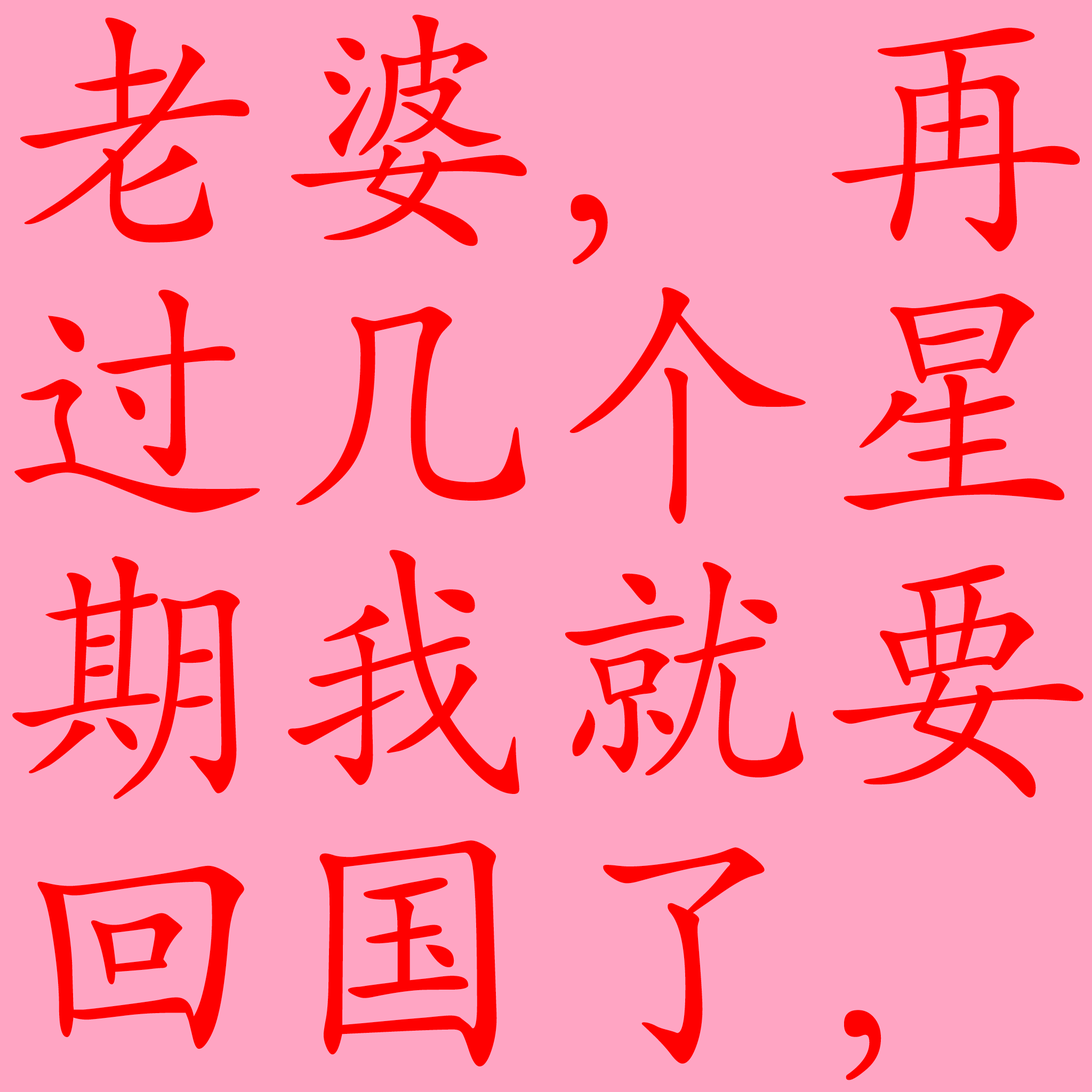
<style>
.page{position:relative;width:1092px;height:1092px;background:#ffa5c3}
.page>*{position:absolute;margin:0}
.t1{font:266.6px/271.9px "SIL-Kai-Reg-Jian";letter-spacing:0.025em;color:#ff0000}
</style>
<div class="page">
<p class="t1" style="left:12px;top:14px;width:1071px;height:1066px">老婆，再<br>过几个星<br>期我就要<br>回国了，</p>
</div>
